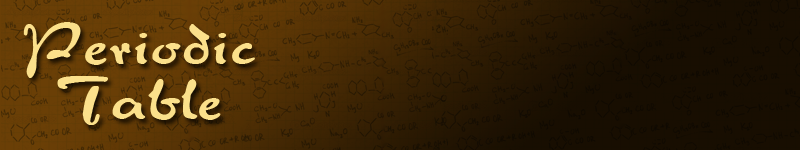
<style>
.page{position:relative;width:800px;height:150px}
.page>*{position:absolute;margin:0}
.t1{font:62.9px/55.1px "VeronaScript";color:#fbe08b;scale:1.5 1}
</style>
<div class="page">
<p class="t1" style="left:23px;top:22px;width:232px;height:103px;text-align:center">Periodic<br>Table</p>
</div>
